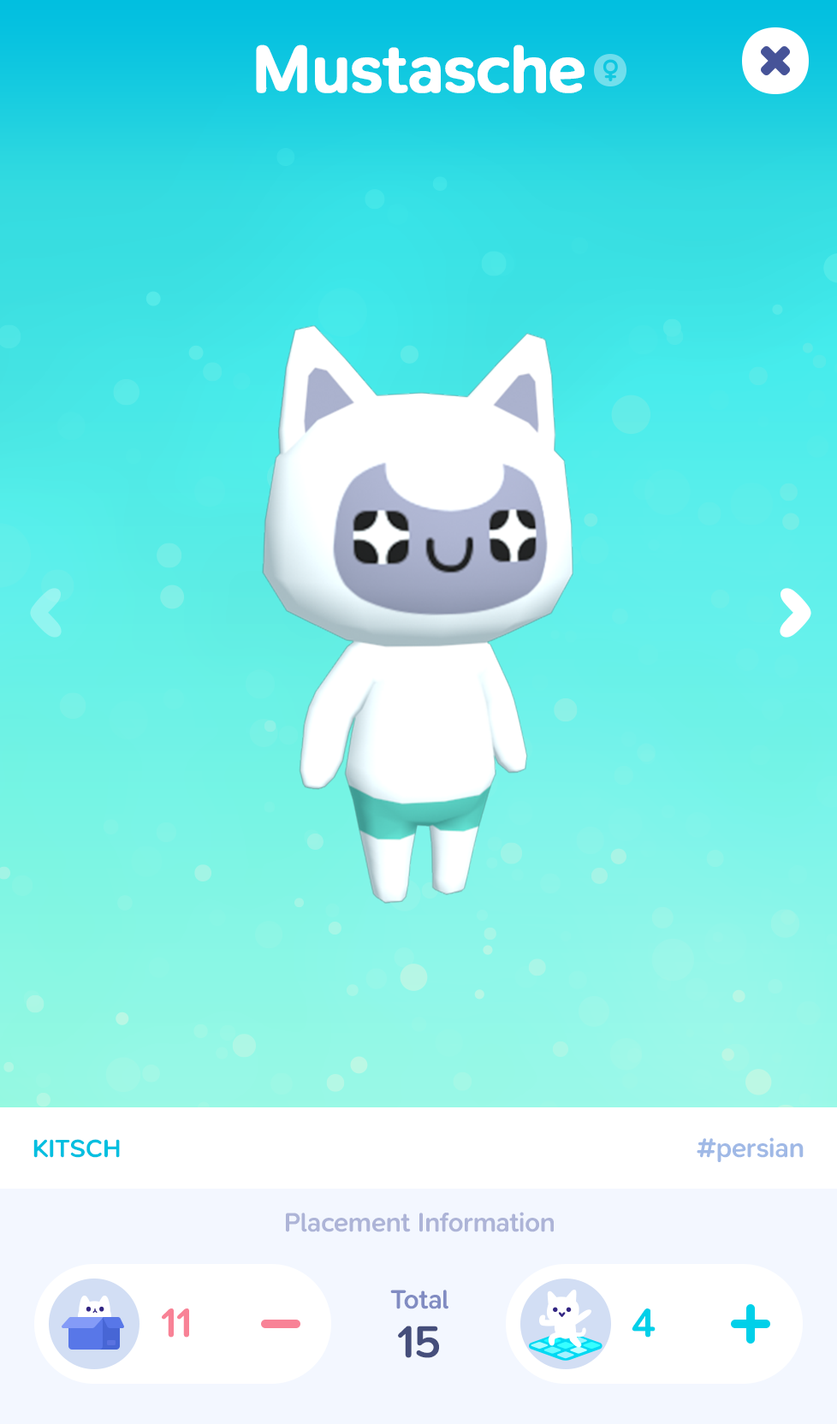
<style>
.page{position:relative;width:837px;height:1424px}
.page>*{position:absolute;margin:0}
.t1{font:68.5px "SNPro-SemiBold";letter-spacing:-0.01em;color:#ffffff;font-weight:bold}
.t2{font:25.7px "SNPro-SemiBold";letter-spacing:-0.01em;color:#01bfe0;text-transform:uppercase}
.t3{font:27.4px "SNPro-SemiBold";letter-spacing:-0.01em;color:#a0b9e6}
.t4{font:27.4px "SNPro-SemiBold";letter-spacing:-0.01em;color:#adb4d7}
.t5{font:27.4px "SNPro-SemiBold";letter-spacing:-0.01em;color:#818cc2}
.t6{font:41.7px "SNPro-SemiBold";letter-spacing:-0.01em;color:#f88296}
.t7{font:41.7px "SNPro-SemiBold";letter-spacing:-0.01em;color:#00d0e9}
.t8{font:46.2px "SNPro-SemiBold";letter-spacing:-0.01em;color:#454e7b}
</style>
<div class="page">
<p class="t1" style="left:256px;top:45px;width:329px;height:48px">Mustasche</p>
<p class="t2" style="left:33px;top:1139px;width:87px;height:19px">Kitsch</p>
<p class="t3" style="left:697px;top:1138px;width:107px;height:24px">#persian</p>
<p class="t4" style="left:286px;top:1212px;width:268px;height:21px">Placement Information</p>
<p class="t5" style="left:390px;top:1290px;width:59px;height:20px">Total</p>
<p class="t6" style="left:162px;top:1309px;width:27px;height:29px">11</p>
<p class="t7" style="left:632px;top:1309px;width:24px;height:29px">4</p>
<p class="t8" style="left:398px;top:1326px;width:41px;height:32px">15</p>
</div>
